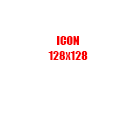
<style>
.page{position:relative;width:128px;height:128px;background:#ffffff}
.page>*{position:absolute;margin:0}
.t1{font:12px "Impact";color:#fa0000}
</style>
<div class="page">
<p class="t1" style="left:48px;top:36px;width:40px;height:24px;text-align:center">ICON<br>128x128</p>
</div>
